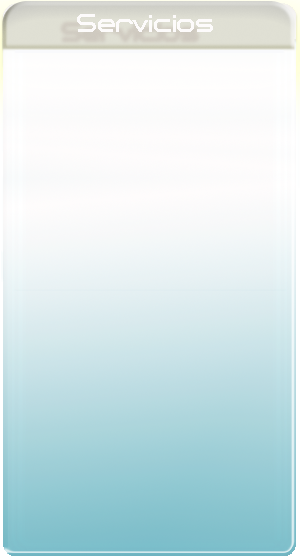
<style>
.page{position:relative;width:300px;height:560px}
.page>*{position:absolute;margin:0}
.t1{font:24px "Dekers_Bold";letter-spacing:-0.01em;color:#fdfbfb}
</style>
<div class="page">
<p class="t1" style="left:77px;top:14px;width:136px;height:18px">Servicios</p>
</div>
